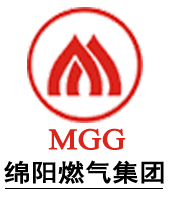
<style>
.page{position:relative;width:170px;height:200px;background:#ffffff}
.page>*{position:absolute;margin:0}
.t1{font:36px "Aparajita";color:#da251d;font-weight:bold;scale:1.1 1}
.t2{font:24px "SimHei";color:#000000;font-weight:bold;scale:1.1 1}
</style>
<div class="page">
<p class="t1" style="left:48px;top:128px;width:78px;height:22px">MGG</p>
<p class="t2" style="left:4px;top:160px;width:160px;height:24px">绵阳燃气集团</p>
</div>
